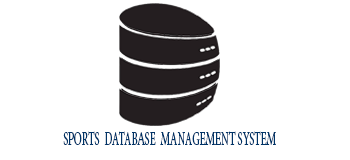
<style>
.page{position:relative;width:350px;height:160px;background:#ffffff}
.page>*{position:absolute;margin:0}
.t1{font:19.4px "MinionPro-Regular";color:#003366;scale:0.55 1}
</style>
<div class="page">
<p class="t1" style="left:63px;top:131px;width:213px;height:14px">SPORTS  DATABASE  MANAGEMENT SYSTEM</p>
</div>
